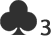
<style>
.page{position:relative;width:55px;height:36px;background:#ffffff}
.page>*{position:absolute;margin:0}
.t1{font:23.4px "MyriadPro-Regular";letter-spacing:-0.1em;color:#303030;font-weight:bold}
</style>
<div class="page">
<p class="t1" style="left:40px;top:19px;width:11px;height:17px">3</p>
</div>
